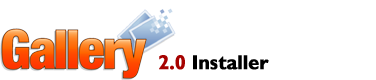
<style>
.page{position:relative;width:376px;height:80px;background:#ffffff}
.page>*{position:absolute;margin:0}
.t1{font:20px "GillSans-Bold";letter-spacing:-0.025em;color:#000000;font-weight:bold}
.t2{font:20px "GillSans-Bold";letter-spacing:-0.025em;color:#a60200;font-weight:bold}
</style>
<div class="page">
<p class="t1" style="left:159px;top:55px;width:110px;height:15px"><span class="t2">2.0 </span>Installer</p>
</div>
